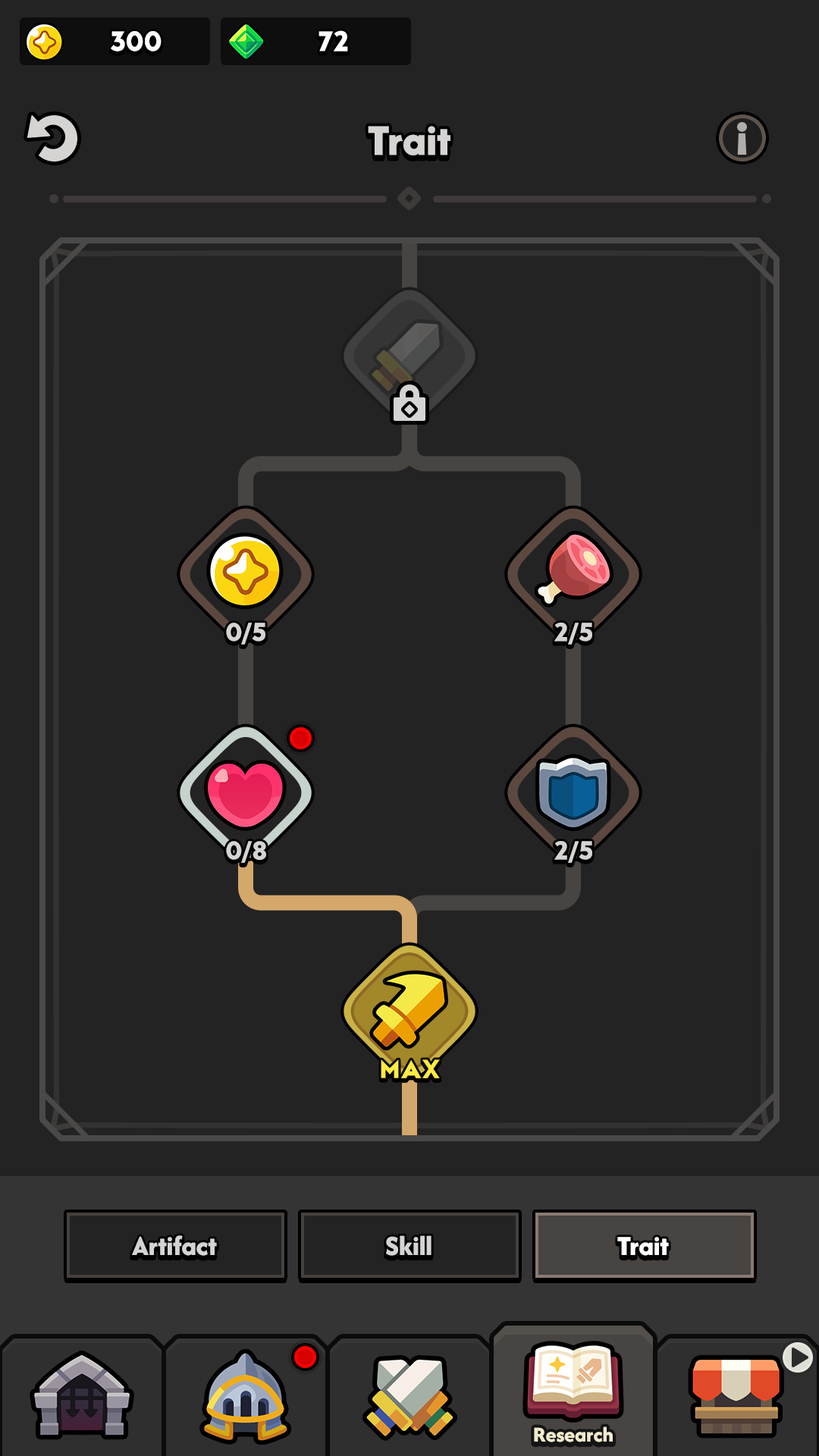
<style>
.page{position:relative;width:819px;height:1456px;background:#232323}
.page>*{position:absolute;margin:0}
.t1{font:29.6px "LTAvocado-Bold";color:#ffffff}
.t2{font:45.5px "AfacadFlux-ExtraBold";color:#d6d4d3}
.t3{font:27.3px "LTAvocado-Bold";color:#d6d4d3;text-transform:uppercase}
.t4{font:27.3px "LTAvocado-Bold";color:#ffeb44;text-transform:uppercase}
.t5{font:28.8px "AfacadFlux-ExtraBold";color:#d6d4d3}
.t6{font:28.8px "AfacadFlux-ExtraBold";color:#ffffff}
.t7{font:22px "AfacadFlux-ExtraBold";color:#f1ebcc}
</style>
<div class="page">
<p class="t1" style="left:111px;top:31px;width:51px;height:21px">300</p>
<p class="t1" style="left:318px;top:30px;width:30px;height:22px">72</p>
<p class="t2" style="left:368px;top:126px;width:82px;height:29px">Trait</p>
<p class="t3" style="left:226px;top:623px;width:39px;height:22px">0/5</p>
<p class="t3" style="left:554px;top:623px;width:38px;height:22px">2/5</p>
<p class="t3" style="left:226px;top:841px;width:40px;height:22px">0/8</p>
<p class="t3" style="left:554px;top:841px;width:38px;height:22px">2/5</p>
<p class="t4" style="left:381px;top:1059px;width:59px;height:19px">Max</p>
<p class="t5" style="left:132px;top:1235px;width:85px;height:21px">Artifact</p>
<p class="t5" style="left:386px;top:1235px;width:45px;height:21px">Skill</p>
<p class="t6" style="left:617px;top:1237px;width:52px;height:19px">Trait</p>
<p class="t6" style="left:617px;top:1237px;width:52px;height:19px">Trait</p>
<p class="t7" style="left:534px;top:1426px;width:79px;height:16px">Research</p>
</div>
